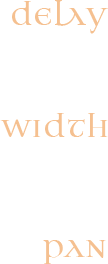
<style>
.page{position:relative;width:108px;height:264px;background:#ffffff}
.page>*{position:absolute;margin:0}
.t1{font:33.3px "JanaThorkPro";color:#f5c090}
</style>
<div class="page">
<p class="t1" style="left:12px;top:0px;width:96px;height:34px">delay</p>
<p class="t1" style="left:0px;top:113px;width:108px;height:24px">width</p>
<p class="t1" style="left:43px;top:240px;width:63px;height:24px">pan</p>
</div>
